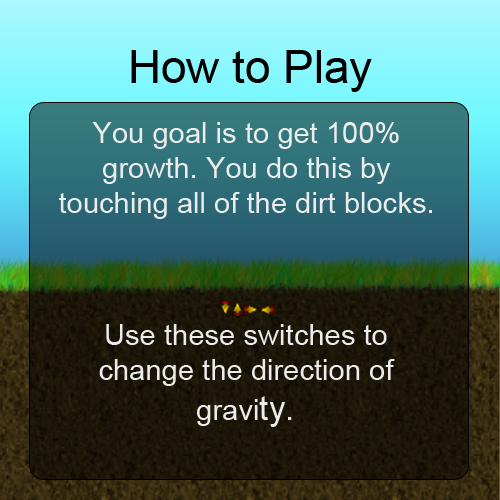
<style>
.page{position:relative;width:500px;height:500px}
.page>*{position:absolute;margin:0}
.t1{font:45.8px "ArialMT";color:#000000}
.t2{font:29.2px "ArialMT";color:#ececec}
.t3{font:33.3px "ArialMT";color:#ececec}
</style>
<div class="page">
<p class="t1" style="left:131px;top:50px;width:241px;height:42px">How to Play</p>
<p class="t2" style="left:59px;top:122px;width:373px;height:97px;text-align:center">You goal is to get 100% growth. You do this by <br>touching all of the dirt blocks.</p>
<p class="t2" style="left:99px;top:324px;width:296px;height:103px;text-align:center">Use these switches to <br>change the direction of <br>gravi<span class="t3">ty.</span></p>
</div>
